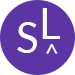
<style>
.page{position:relative;width:75px;height:75px;background:#5c34a4}
.page>*{position:absolute;margin:0}
.t1{font:41.7px "Lato-Regular";color:#ffffff}
.t2{font:50px "Lato-Regular";color:#ffffff}
.t3{font:25px "Lato-Regular";color:#ffffff}
</style>
<div class="page">
<p class="t1" style="left:42px;top:8px;width:18px;height:31px">L</p>
<p class="t2" style="left:17px;top:22px;width:20px;height:31px"><span class="t1">S</span>^^</p>
<p class="t3" style="left:46px;top:44px;width:12px;height:10px">^</p>
</div>
